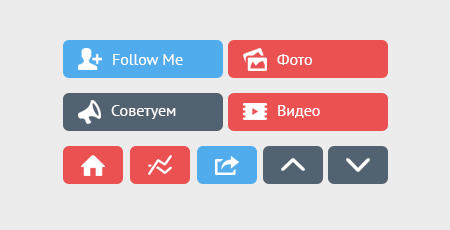
<style>
.page{position:relative;width:450px;height:230px;background:#ececec}
.page>*{position:absolute;margin:0}
.t1{font:16px "PTSans-Regular";color:#ffffff}
</style>
<div class="page">
<p class="t1" style="left:113px;top:54px;width:70px;height:11px">Follow Me</p>
<p class="t1" style="left:277px;top:54px;width:35px;height:11px">Фото</p>
<p class="t1" style="left:111px;top:105px;width:65px;height:14px">Советуем</p>
<p class="t1" style="left:278px;top:105px;width:42px;height:13px">Видео</p>
</div>
